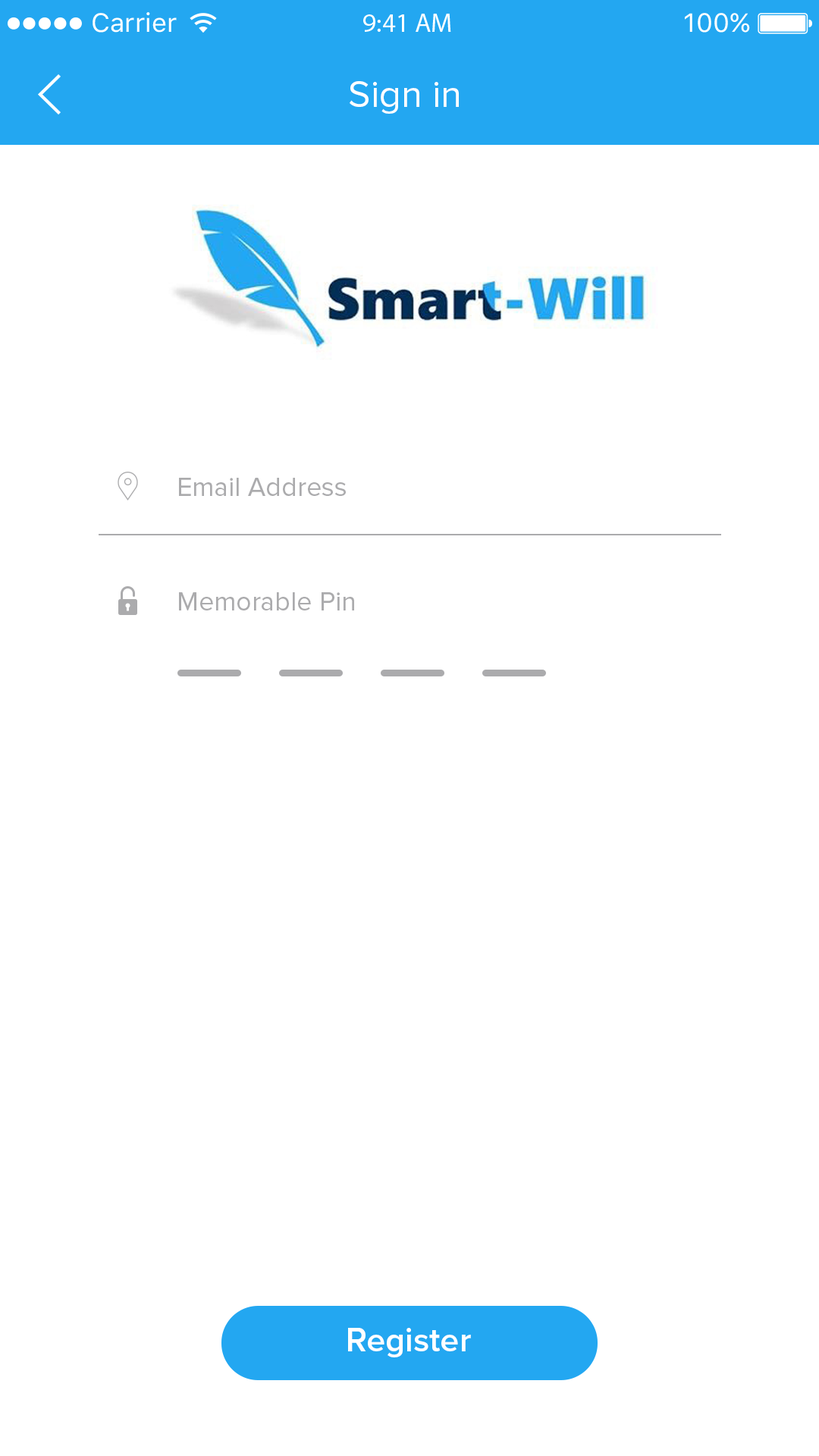
<style>
.page{position:relative;width:819px;height:1456px;background:#ffffff}
.page>*{position:absolute;margin:0}
.t1{font:38.1px "ProximaNova-Regular";color:#ffffff}
.t2{font:27.3px "ProximaNova-Regular";color:#ababad}
.t3{font:34.1px "ProximaNova-Semibold";color:#ffffff}
</style>
<div class="page">
<p class="t1" style="left:350px;top:81px;width:109px;height:33px">Sign in</p>
<p class="t2" style="left:179px;top:478px;width:167px;height:18px">Email Address</p>
<p class="t2" style="left:179px;top:592px;width:175px;height:18px">Memorable Pin</p>
<p class="t3" style="left:348px;top:1328px;width:123px;height:29px">Register</p>
</div>
